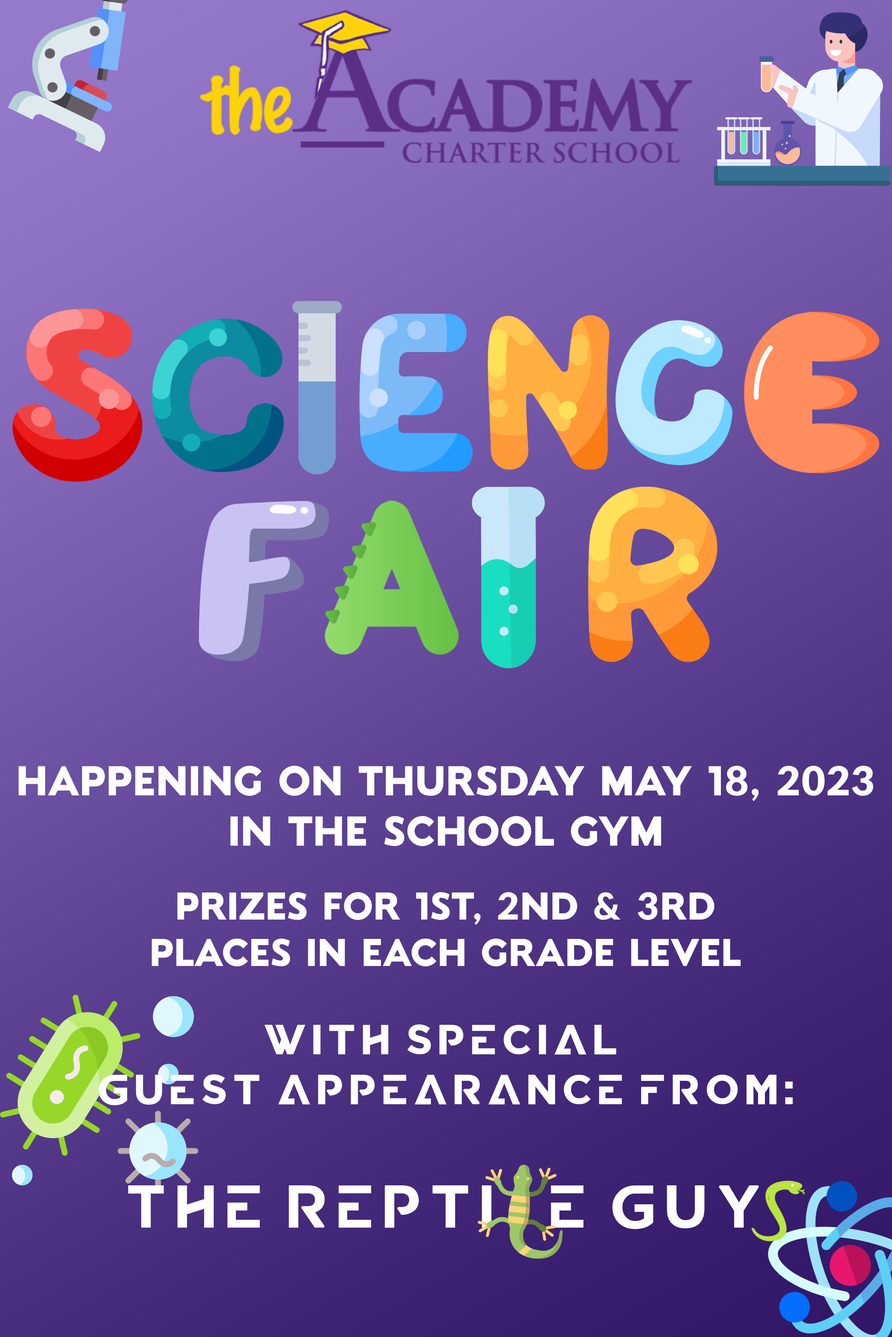
<style>
.page{position:relative;width:892px;height:1337px}
.page>*{position:absolute;margin:0}
.t1{font:41.8px "CandleRegular";color:#ffffff}
.t2{font:38.7px "CandleRegular";color:#ffffff}
.t3{font:41.8px "BabaPro";color:#ffffff}
.t4{font:61.1px "BabaPro";color:#ffffff}
</style>
<div class="page">
<p class="t1" style="left:19px;top:766px;width:854px;height:81px;text-align:center">happening on THURSDAY MAY 18, 2023<br>in the School gym</p>
<p class="t2" style="left:151px;top:892px;width:589px;height:75px;text-align:center">Prizes for 1st, 2nd &amp; 3rd<br>places in each grade level</p>
<p class="t3" style="left:99px;top:1025px;width:694px;height:204px;text-align:center">with special <br>guest appearance from:<br><br><span class="t4">the repti   e guy</span></p>
</div>
